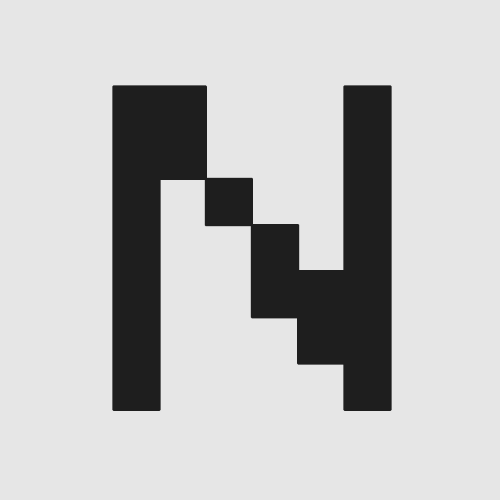
<style>
.page{position:relative;width:500px;height:500px;background:#e6e6e6}
.page>*{position:absolute;margin:0}
.t1{font:461.8px "Redaction100-Regular";color:#1e1e1e;font-weight:bold}
</style>
<div class="page">
<p class="t1" style="left:112px;top:85px;width:280px;height:326px">N</p>
</div>
